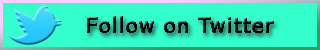
<style>
.page{position:relative;width:320px;height:50px;background:#33ffcc}
.page>*{position:absolute;margin:0}
.t1{font:20px "Verdana";color:#000000;font-weight:bold}
</style>
<div class="page">
<p class="t1" style="left:87px;top:16px;width:187px;height:17px">Follow on Twitter</p>
</div>
